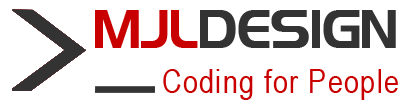
<style>
.page{position:relative;width:404px;height:105px;background:#ffffff}
.page>*{position:absolute;margin:0}
.t1{font:48.6px "HighlandGothicFLF";color:#333333}
.t2{font:48.6px "HighlandGothicFLF";color:#c90000}
.t3{font:33.3px "ArialNarrow";letter-spacing:0.035em;color:#c90000}
</style>
<div class="page">
<p class="t1" style="left:95px;top:10px;width:301px;height:38px"><span class="t2">MJL</span>DESIGN</p>
<p class="t3" style="left:163px;top:69px;width:235px;height:31px">Coding for People</p>
</div>
